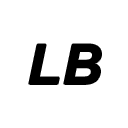
<style>
.page{position:relative;width:128px;height:128px;background:#ffffff}
.page>*{position:absolute;margin:0}
.t1{font:55.2px "Arial-BoldItalicMT";letter-spacing:0.02em;color:#000000}
</style>
<div class="page">
<p class="t1" style="left:29px;top:44px;width:72px;height:40px">LB</p>
</div>
